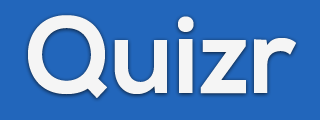
<style>
.page{position:relative;width:320px;height:120px;background:#2266bb}
.page>*{position:absolute;margin:0}
.t1{font:108px "NexaBold";color:#f5f5f5}
</style>
<div class="page">
<p class="t1" style="left:28px;top:15px;width:268px;height:83px">Quizr</p>
</div>
